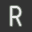
<style>
.page{position:relative;width:32px;height:32px;background:#333333}
.page>*{position:absolute;margin:0}
.t1{font:31.2px "ISOCPEUR";color:#eaeaea;scale:0.91 1}
</style>
<div class="page">
<p class="t1" style="left:10px;top:6px;width:12px;height:20px">R</p>
</div>
